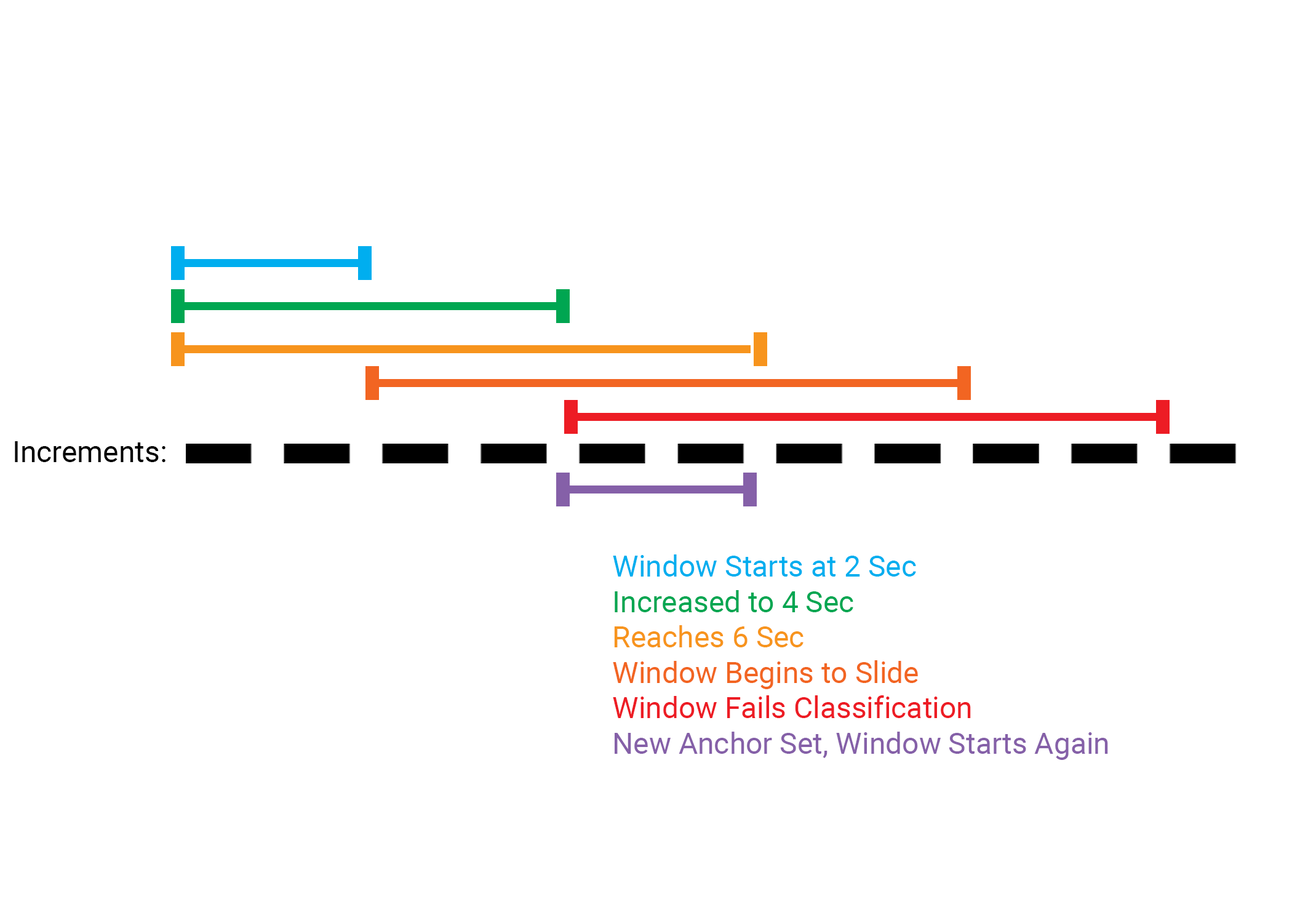
<style>
.page{position:relative;width:1292px;height:923px;background:#ffffff}
.page>*{position:absolute;margin:0}
.t1{font:29.5px "Roboto-Regular";color:#000000}
.t2{font:29.5px "Roboto-Regular";color:#8560a8}
.t3{font:29.5px "Roboto-Regular";color:#00aeef}
.t4{font:29.5px "Roboto-Regular";color:#00a651}
.t5{font:29.5px "Roboto-Regular";color:#f7941d}
.t6{font:29.5px "Roboto-Regular";color:#f26522}
.t7{font:29.5px "Roboto-Regular";color:#ed1c24}
</style>
<div class="page">
<p class="t1" style="left:15px;top:441px;width:151px;height:21px">Increments:</p>
<p class="t2" style="left:613px;top:554px;width:495px;height:206px"><span class="t3">Window Starts at 2 Sec<br></span><span class="t4">Increased to 4 Sec<br></span><span class="t5">Reaches 6 Sec<br></span><span class="t6">Window Begins to Slide<br></span><span class="t7">Window Fails Classification<br></span>New Anchor Set, Window Starts Again</p>
</div>
